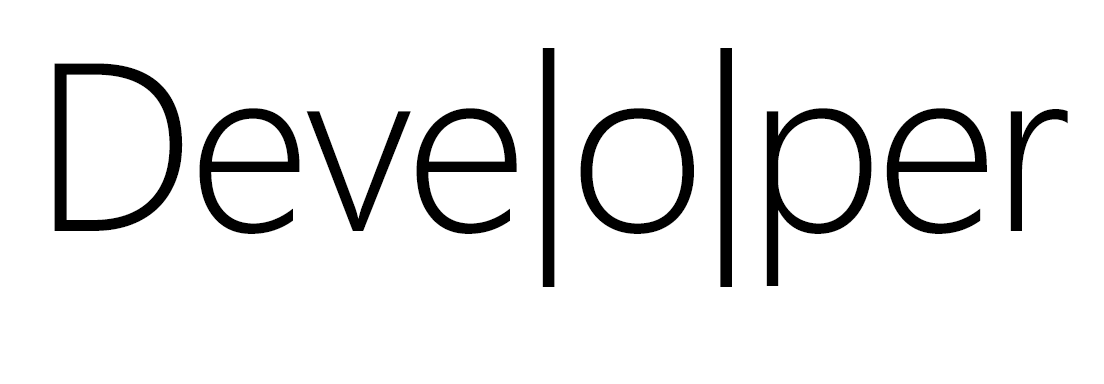
<style>
.page{position:relative;width:1104px;height:384px;background:#ffffff}
.page>*{position:absolute;margin:0}
.t1{font:221.3px "MicrosoftJhengHeiUILight";letter-spacing:-0.025em;color:#000000}
</style>
<div class="page">
<p class="t1" style="left:54px;top:48px;width:1014px;height:239px">Deve|o|per</p>
</div>
